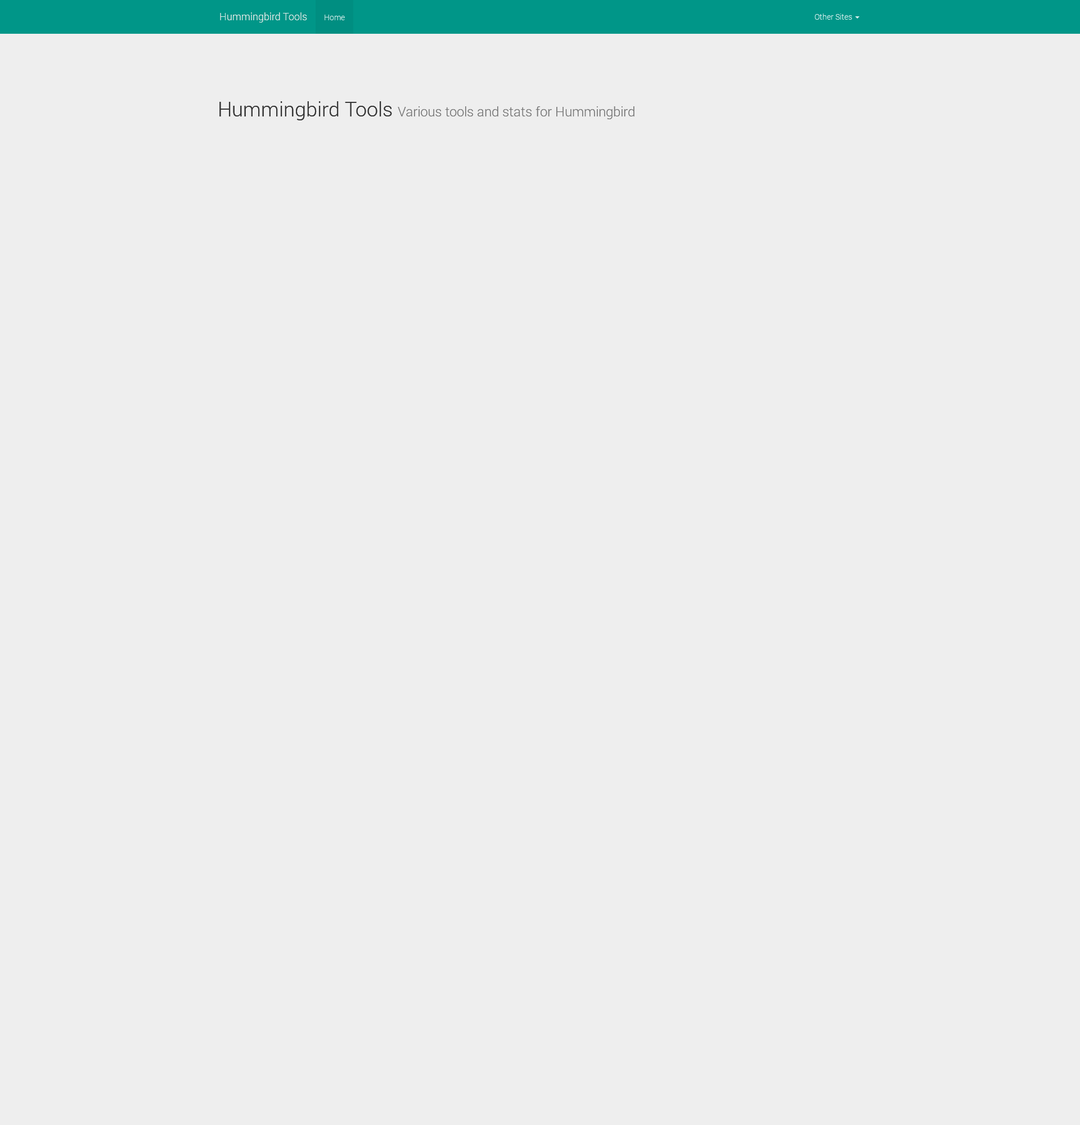
<style>
.page{position:relative;width:1080px;height:1125px;background:#eeeeee}
.page>*{position:absolute;margin:0}
.t1{font:10.1px "Roboto-Light";color:#e4f0ee}
.t2{font:7.9px "Roboto-Light";color:#d6edeb}
.t3{font:7.9px "Roboto-Light";color:#d6eeec}
.t4{font:13.5px "Roboto-Light";color:#777777}
.t5{font:20.2px "Roboto-Light";color:#333333}
</style>
<div class="page">
<p class="t1" style="left:220px;top:12px;width:87px;height:10px">Hummingbird Tools</p>
<p class="t2" style="left:325px;top:15px;width:20px;height:5px">Home</p>
<p class="t3" style="left:814px;top:14px;width:38px;height:6px">Other Sites</p>
<p class="t4" style="left:219px;top:101px;width:415px;height:19px"><span class="t5">Hummingbird Tools </span>Various tools and stats for Hummingbird</p>
</div>
